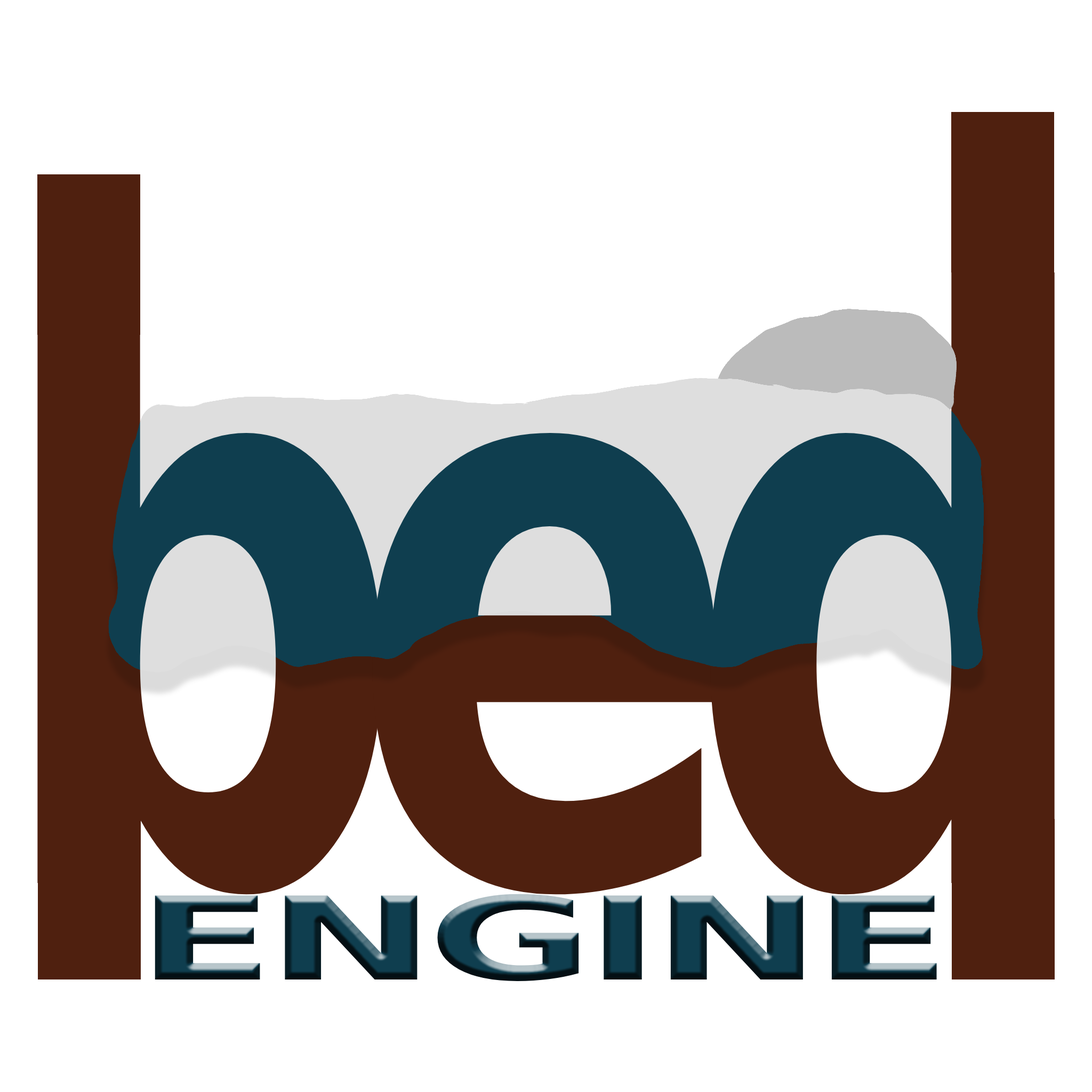
<style>
.page{position:relative;width:1092px;height:1092px;background:#ffffff}
.page>*{position:absolute;margin:0}
.t1{font:803.5px "DejaVuSans-Bold";letter-spacing:-0.104em;color:#4f200f;scale:0.73 1}
.t2{font:803.5px "DejaVuSans-Bold";letter-spacing:-0.104em;scale:0.73 1}
.t3{font:115.2px "DejaVuSans-Bold";letter-spacing:-0.104em;scale:1.76 1}
</style>
<div class="page">
<p class="t1" style="left:37px;top:272px;width:1018px;height:623px">bed</p>
<p class="t2" style="left:37px;top:272px;width:1018px;height:623px">bed</p>
<p class="t3" style="left:155px;top:894px;width:782px;height:87px">ENGINE</p>
</div>
